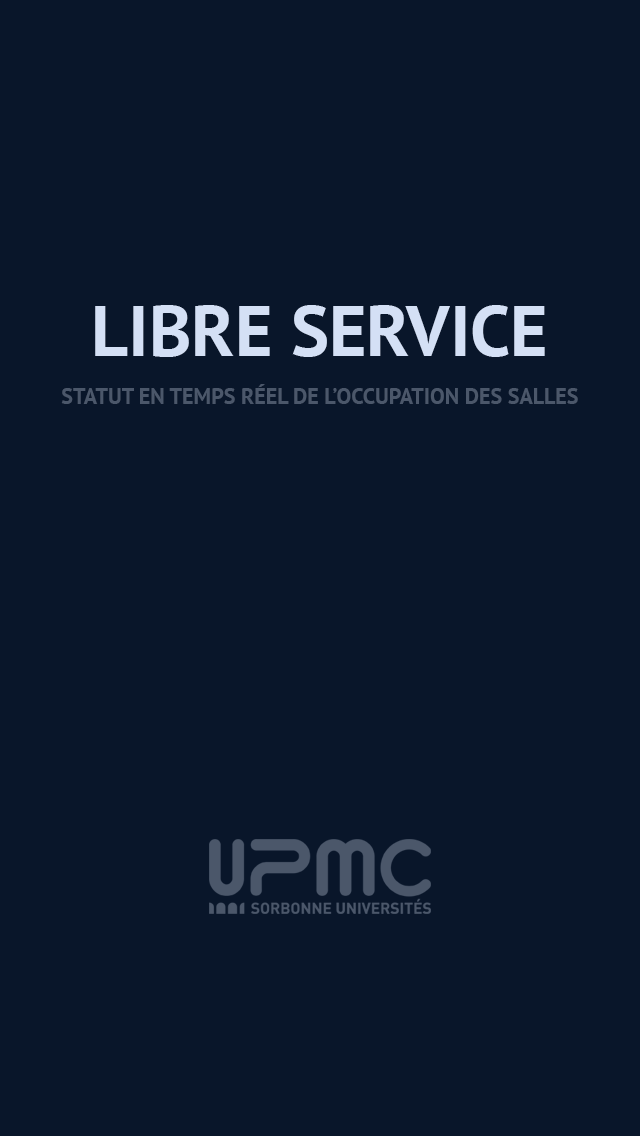
<style>
.page{position:relative;width:640px;height:1136px;background:#09162a}
.page>*{position:absolute;margin:0}
.t1{font:72px "PTSans-Bold";color:#d4e0f5}
.t2{font:22px "PTSans-Bold";color:#4b576a}
</style>
<div class="page">
<p class="t1" style="left:95px;top:305px;width:450px;height:52px">LIBRE SERVICE</p>
<p class="t2" style="left:61px;top:384px;width:517px;height:20px">STATUT EN TEMPS RÉEL DE L’OCCUPATION DES SALLES</p>
</div>
